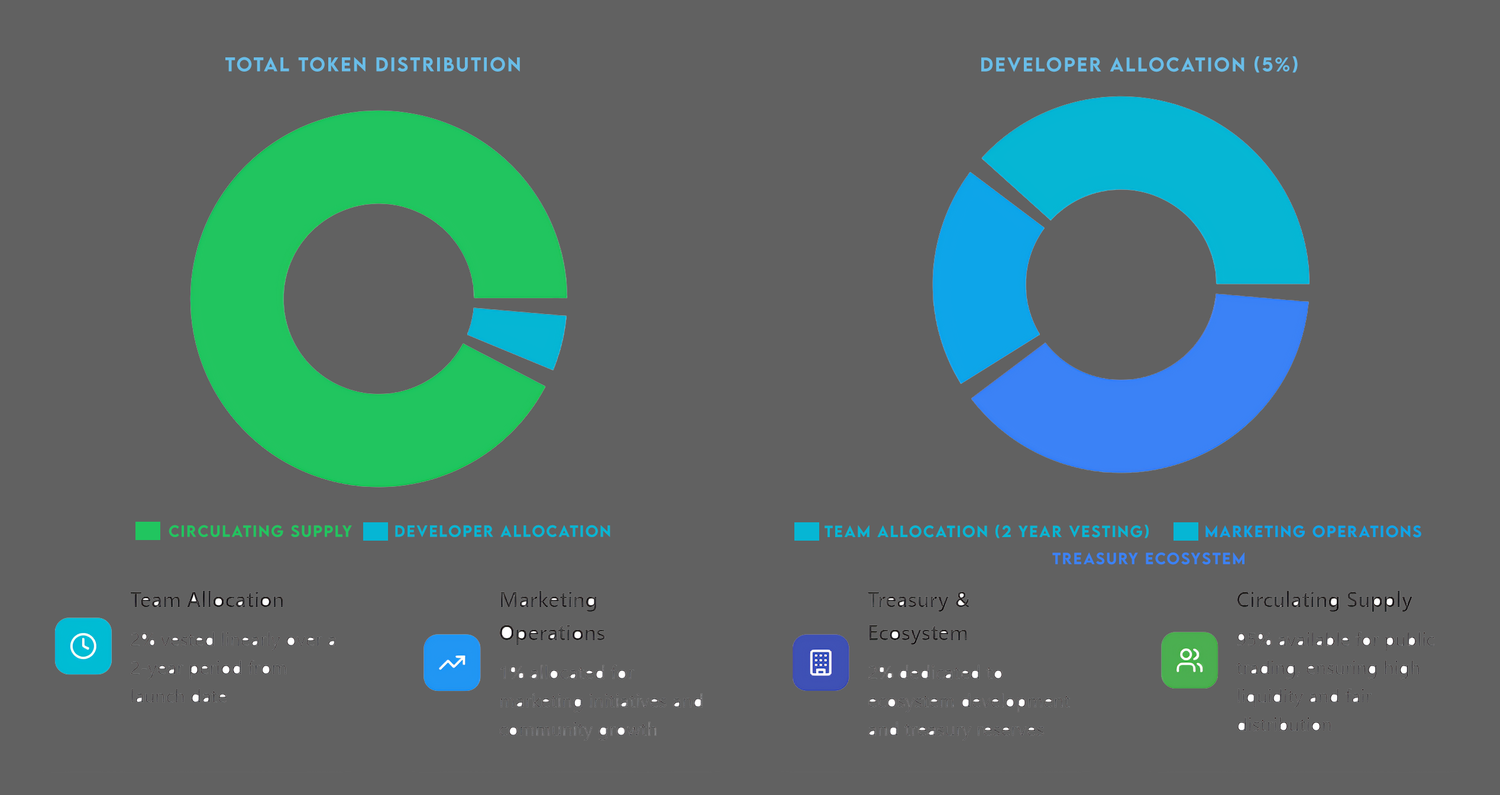
<style>
.page{position:relative;width:1500px;height:795px;background:#616161}
.page>*{position:absolute;margin:0}
.t1{font:17.7px "LEMONMILK-Medium";letter-spacing:0.1em;color:#69bde8}
.t2{font:14.5px "LEMONMILK-Medium";letter-spacing:0.1em;color:#21c55f}
.t3{font:14.5px "LEMONMILK-Medium";letter-spacing:0.1em;color:#05b6d4}
.t4{font:14.5px "LEMONMILK-Medium";letter-spacing:0.1em;color:#06b6d4}
.t5{font:14.5px "LEMONMILK-Medium";letter-spacing:0.1em;color:#0da5e9}
.t6{font:14.5px "LEMONMILK-Medium";letter-spacing:0.1em;color:#3b82f6}
</style>
<div class="page">
<p class="t1" style="left:225px;top:57px;width:295px;height:15px">Total Token Distribution</p>
<p class="t1" style="left:981px;top:56px;width:317px;height:17px">Developer Allocation (5%)</p>
<p class="t2" style="left:169px;top:525px;width:183px;height:12px">Circulating Supply</p>
<p class="t3" style="left:395px;top:525px;width:215px;height:12px">Developer Allocation</p>
<p class="t4" style="left:825px;top:525px;width:324px;height:13px">Team Allocation (2 Year Vesting)</p>
<p class="t5" style="left:1205px;top:525px;width:216px;height:13px">marketing Operations</p>
<p class="t6" style="left:1052px;top:552px;width:192px;height:13px">Treasury Ecosystem</p>
</div>
